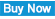
<style>
.page{position:relative;width:55px;height:19px;background:#1094d3}
.page>*{position:absolute;margin:0}
.t1{font:11.8px "ArialMT";color:#ffffff;font-weight:bold;scale:0.96 1}
</style>
<div class="page">
<p class="t1" style="left:4px;top:3px;width:47px;height:12px">Buy Now</p>
</div>
